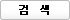
<style>
.page{position:relative;width:70px;height:20px;background:#ffffff}
.page>*{position:absolute;margin:0}
.t1{font:12px "morris9";color:#000000;font-weight:bold;scale:0.96 1}
</style>
<div class="page">
<p class="t1" style="left:19px;top:5px;width:30px;height:10px">검  색</p>
</div>
